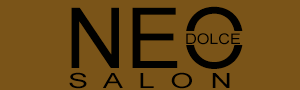
<style>
.page{position:relative;width:300px;height:90px;background:#7a5418}
.page>*{position:absolute;margin:0}
.t1{font:84px "ArialMT";color:#010100}
.t2{font:14.4px "ArialMT";color:#000000;scale:1.12 1}
.t3{font:21px "ArialMT";color:#000000;scale:1.43 1}
</style>
<div class="page">
<p class="t1" style="left:71px;top:6px;width:172px;height:63px">NEO</p>
<p class="t2" style="left:186px;top:33px;width:54px;height:12px">DOLCE</p>
<p class="t3" style="left:69px;top:72px;width:161px;height:17px">S  A  L  O  N</p>
</div>
